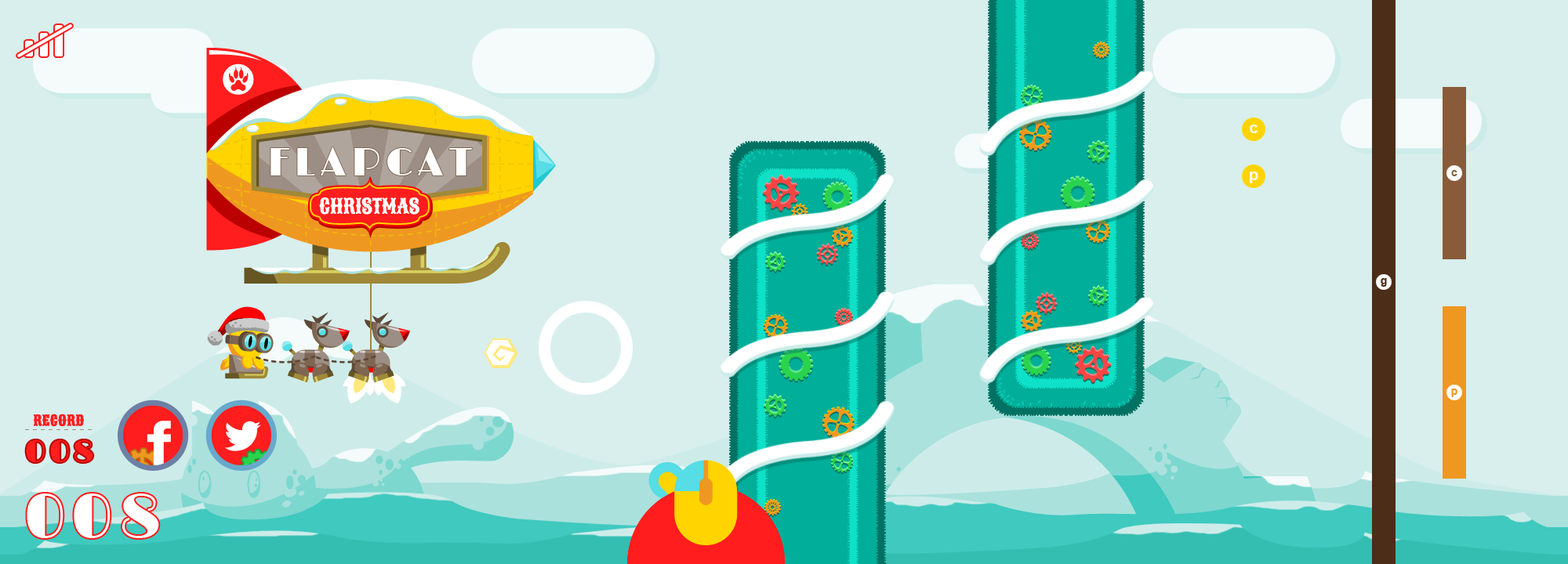
<style>
.page{position:relative;width:1568px;height:564px;background:#d8efed}
.page>*{position:absolute;margin:0}
.t1{font:15.7px "Arial-BoldMT";color:#ffffff}
.t2{font:39.2px "Limelight-Regular";letter-spacing:0.13em;color:#ffffff;text-transform:uppercase}
.t3{font:11px "Arial-BoldMT";color:#895b3a}
.t4{font:20.4px "Sancreek-Regular";color:#ffffff;text-transform:uppercase}
.t5{font:11px "Arial-BoldMT";color:#4c2d18}
.t6{font:11px "Arial-BoldMT";color:#ef9821}
.t7{font:14.1px "Sancreek-Regular";color:#ff1d1d;text-transform:uppercase;font-weight:bold}
.t8{font:31.4px "Limelight-Regular";letter-spacing:0.1em;color:#ff1d1d;text-transform:uppercase}
.t9{font:62.7px "Limelight-Regular";letter-spacing:0.1em;color:#ffffff;text-transform:uppercase}
</style>
<div class="page">
<p class="t1" style="left:1250px;top:125px;width:8px;height:8px">c</p>
<p class="t2" style="left:270px;top:147px;width:203px;height:29px">flapcat</p>
<p class="t1" style="left:1250px;top:172px;width:8px;height:11px">p</p>
<p class="t3" style="left:1451px;top:170px;width:6px;height:6px">c</p>
<p class="t4" style="left:319px;top:198px;width:100px;height:17px">CHRISTMAS</p>
<p class="t5" style="left:1381px;top:278px;width:6px;height:9px">g</p>
<p class="t6" style="left:1451px;top:389px;width:6px;height:8px">p</p>
<p class="t7" style="left:33px;top:414px;width:52px;height:13px">record</p>
<p class="t8" style="left:26px;top:441px;width:67px;height:22px">008</p>
<p class="t9" style="left:27px;top:494px;width:132px;height:45px">008</p>
</div>
